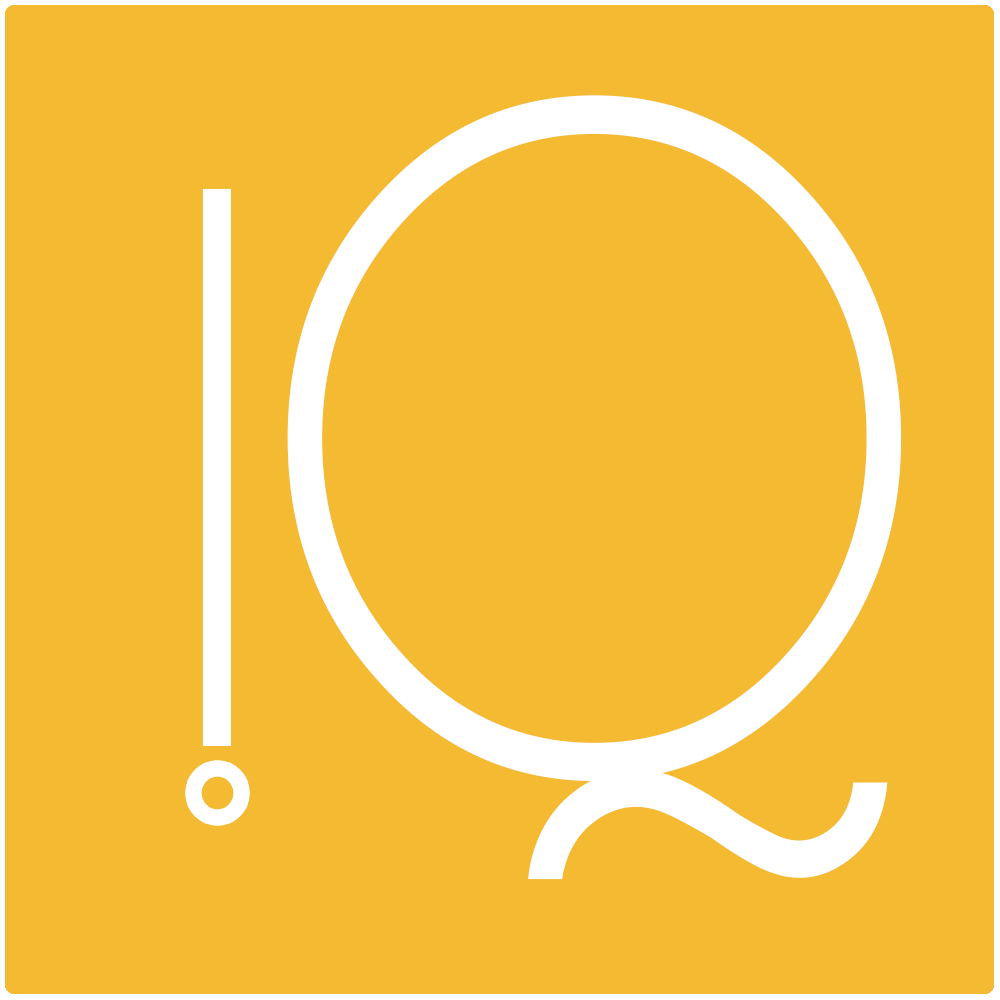
<style>
.page{position:relative;width:1000px;height:1000px;background:#f4ba31}
.page>*{position:absolute;margin:0}
.t1{font:855px "CaviarDreams";letter-spacing:0.05em;color:#ffffff;scale:0.89 1}
.t2{font:712.5px "CaviarDreams";letter-spacing:0.05em;color:#ffffff;scale:0.89 1}
</style>
<div class="page">
<p class="t1" style="left:287px;top:95px;width:615px;height:785px">Q</p>
<p class="t2" style="left:202px;top:188px;width:29px;height:558px">I</p>
</div>
